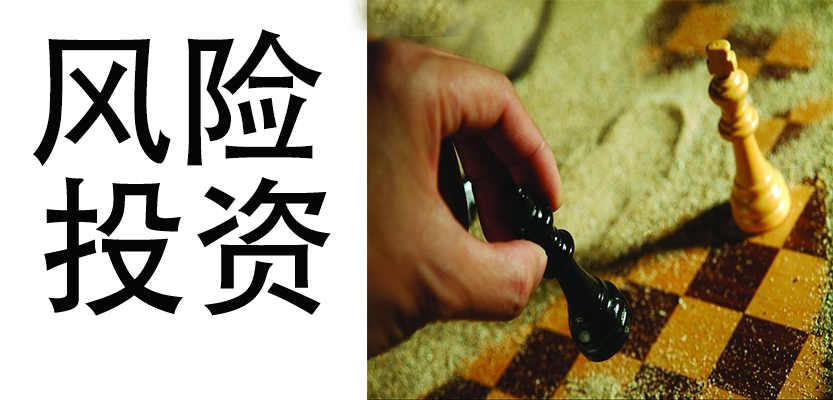
<style>
.page{position:relative;width:833px;height:400px;background:#ffffff}
.page>*{position:absolute;margin:0}
.t1{font:150px "AdobeHeitiStd-Regular";color:#050505}
</style>
<div class="page">
<p class="t1" style="left:33px;top:29px;width:290px;height:137px">风险<br>投资</p>
</div>
